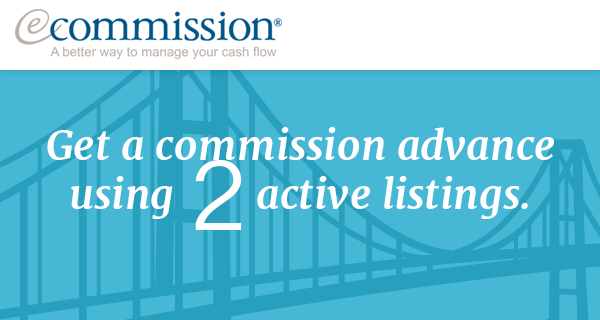
<style>
.page{position:relative;width:600px;height:320px;background:#46b7d5}
.page>*{position:absolute;margin:0}
.t1{font:40.8px "Merriweather-BoldItalic";color:#ffffff}
.t2{font:102.7px "KhmerSangamMN";color:#ffffff;text-transform:uppercase}
</style>
<div class="page">
<p class="t1" style="left:47px;top:127px;width:507px;height:33px">Get a commission advance</p>
<p class="t2" style="left:195px;top:160px;width:47px;height:70px">2</p>
<p class="t1" style="left:71px;top:176px;width:457px;height:43px">using        active listings.</p>
</div>
